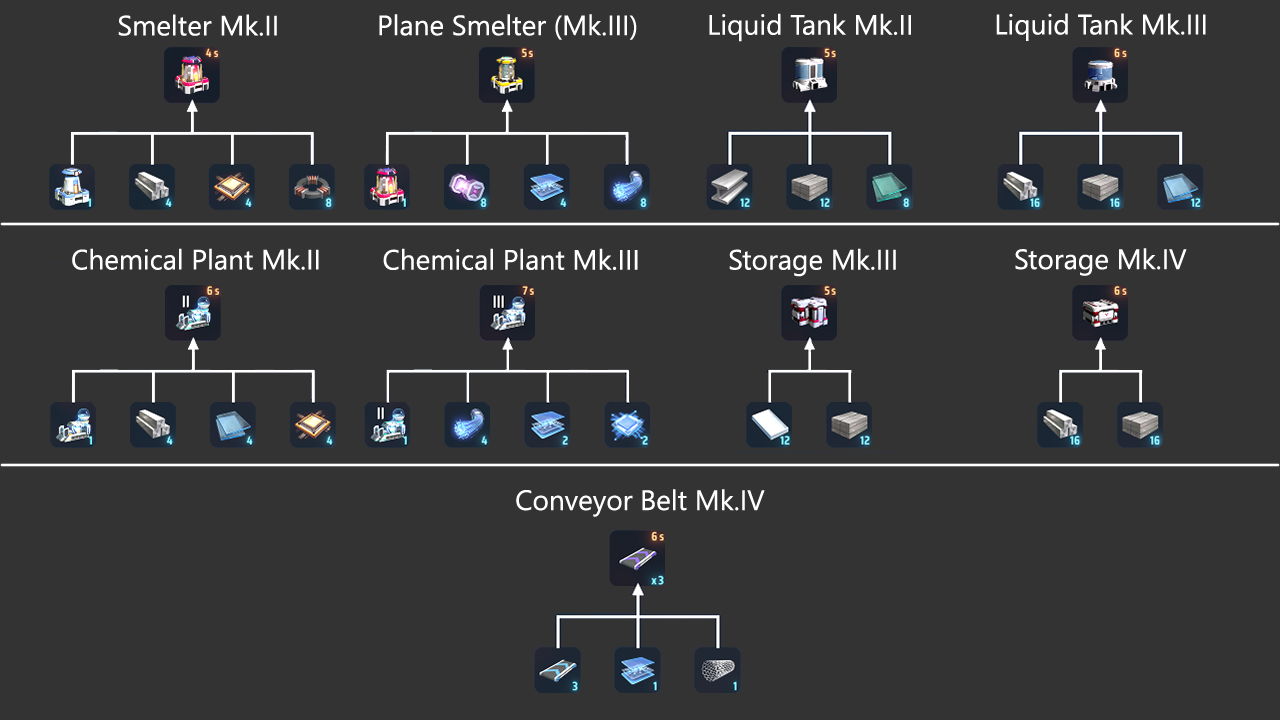
<style>
.page{position:relative;width:1280px;height:720px;background:#333333}
.page>*{position:absolute;margin:0}
.t1{font:48px "SegoeUI";color:#ffffff}
</style>
<div class="page">
<p class="t1" style="left:118px;top:14px;width:159px;height:22px">Smelter Mk.II</p>
<p class="t1" style="left:379px;top:14px;width:258px;height:26px">Plane Smelter (Mk.III)</p>
<p class="t1" style="left:709px;top:13px;width:202px;height:29px">Liquid Tank Mk.II</p>
<p class="t1" style="left:996px;top:13px;width:210px;height:28px">Liquid Tank Mk.III</p>
<p class="t1" style="left:72px;top:248px;width:247px;height:22px">Chemical Plant Mk.II</p>
<p class="t1" style="left:383px;top:248px;width:255px;height:22px">Chemical Plant Mk.III</p>
<p class="t1" style="left:729px;top:248px;width:167px;height:29px">Storage Mk.III</p>
<p class="t1" style="left:1015px;top:248px;width:172px;height:28px">Storage Mk.IV</p>
<p class="t1" style="left:516px;top:489px;width:249px;height:28px">Conveyor Belt Mk.IV</p>
</div>
